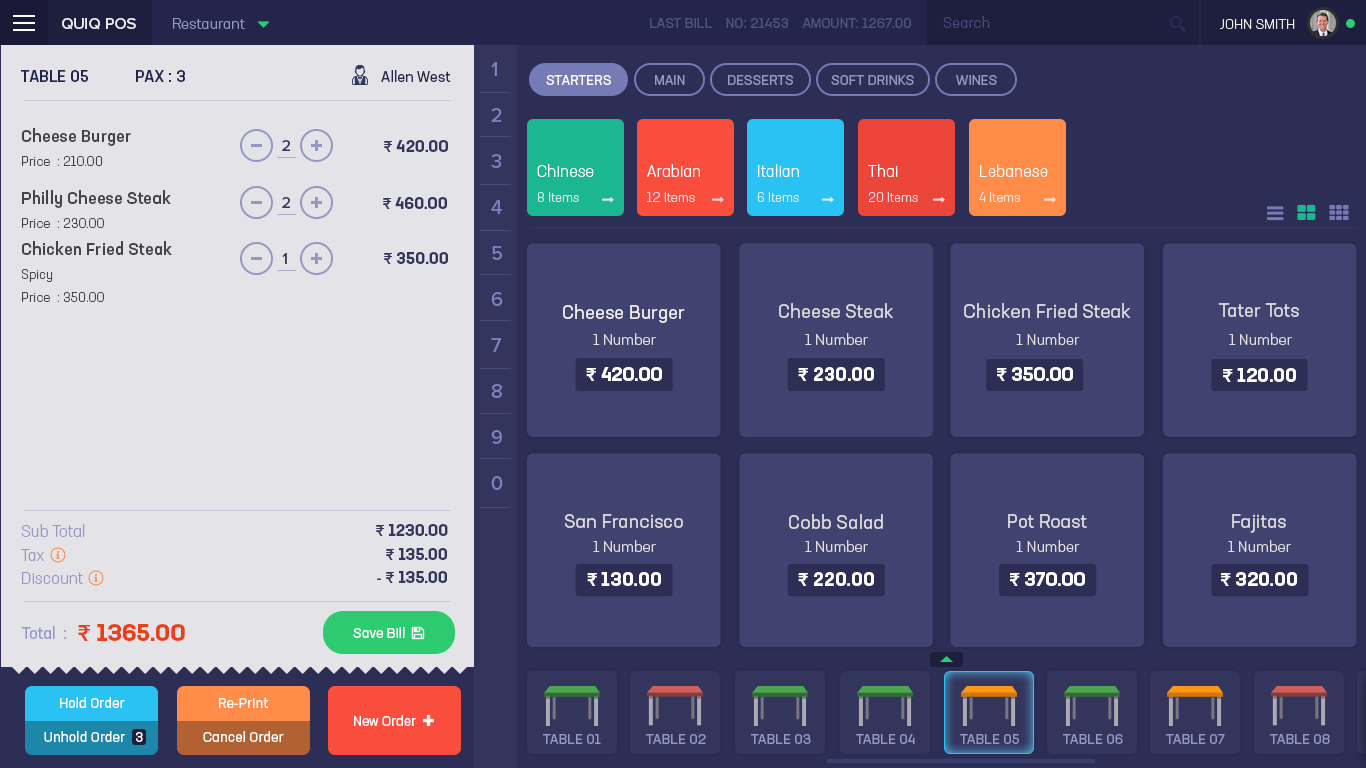
<style>
.page{position:relative;width:1366px;height:768px;background:#e3e3e8}
.page>*{position:absolute;margin:0}
.t1{font:15px "NeusaNextStd-Light";color:#474975}
.t2{font:16px "ProximaNova-Medium";color:#ededed}
.t3{font:15px "NeusaNextStd-Light";color:#9597c4}
.t4{font:14px "NeusaNextStd-Regular";color:#50537d;text-transform:uppercase}
.t5{font:14px "NeusaNextStd-Light";color:#ededed;text-transform:uppercase}
.t6{font:20px/46px "ProximaNova-Medium";color:#7e82c0}
.t7{font:16px "NeusaNextStd-Medium";color:#23254a;text-transform:uppercase}
.t8{font:15px "NeusaNextStd-Regular";color:#23254a}
.t9{font:14px "NeusaNextStd-Regular";color:#ffffff;text-transform:uppercase}
.t10{font:14px "NeusaNextStd-Regular";color:#9597c4;text-transform:uppercase}
.t11{font:17px "NeusaNextStd-Medium";color:#444444}
.t12{font:16px "ProximaNova-Medium";color:#33355d}
.t13{font:16px "NeusaNextStd-Bold";color:#33355d}
.t14{font:16px "ProximaNova-Semibold";color:#33355d}
.t15{font:13px "NeusaNextStd-Light";color:#444444}
.t16{font:16px "NeusaNextStd-Light";color:#ffffff}
.t17{font:13px "NeusaNextStd-Light";color:#d6eee6}
.t18{font:13px "NeusaNextStd-Light";color:#fedbd9}
.t19{font:13px "NeusaNextStd-Light";color:#d7f0fc}
.t20{font:13px "NeusaNextStd-Light";color:#fadbd9}
.t21{font:13px "NeusaNextStd-Light";color:#ffe6db}
.t22{font:19px "NeusaNextStd-Regular";color:#f5f5f5}
.t23{font:19px "NeusaNextStd-Regular";color:#e0e0e0}
.t24{font:15.2px "NeusaNextStd-Light";color:#e0e0e0}
.t25{font:19px "NeusaNextStd-Bold";color:#ffffff}
.t26{font:19px "ProximaNova-Semibold";color:#ffffff}
.t27{font:16px "NeusaNextStd-Light";color:#9597c4}
.t28{font:16px "NeusaNextStd-Regular";color:#9597c4}
.t29{font:24px "NeusaNextStd-Bold";color:#e84118}
.t30{font:24px "ProximaNova-Semibold";color:#e84118}
.t31{font:14px "NeusaNextStd-Regular";color:#ffffff}
</style>
<div class="page">
<p class="t1" style="left:943px;top:16px;width:47px;height:12px">Search</p>
<p class="t2" style="left:62px;top:18px;width:74px;height:12px">QUIQ POS</p>
<p class="t3" style="left:173px;top:18px;width:72px;height:11px">Restaurant</p>
<p class="t4" style="left:650px;top:18px;width:261px;height:10px">Last Bill    NO: 21453    Amount: 1267.00</p>
<p class="t5" style="left:1220px;top:19px;width:75px;height:10px">John Smith</p>
<p class="t6" style="left:491px;top:62px;width:12px;height:428px">1<br>2<br>3<br>4<br>5<br>6<br>7<br>8<br>9<br>0</p>
<p class="t7" style="left:21px;top:70px;width:67px;height:12px">Table 05</p>
<p class="t7" style="left:136px;top:70px;width:49px;height:12px">PAX : 3</p>
<p class="t8" style="left:381px;top:70px;width:70px;height:12px">Allen West</p>
<p class="t9" style="left:546px;top:75px;width:65px;height:10px">Starters</p>
<p class="t10" style="left:655px;top:75px;width:30px;height:10px">Main</p>
<p class="t10" style="left:728px;top:75px;width:65px;height:10px">Desserts</p>
<p class="t10" style="left:831px;top:75px;width:83px;height:10px">Soft Drinks</p>
<p class="t10" style="left:956px;top:75px;width:41px;height:10px">Wines</p>
<p class="t11" style="left:22px;top:128px;width:109px;height:18px">Cheese Burger</p>
<p class="t12" style="left:282px;top:140px;width:8px;height:11px">2</p>
<p class="t13" style="left:384px;top:140px;width:64px;height:12px"><span class="t14">₹</span> 420.00</p>
<p class="t15" style="left:22px;top:156px;width:81px;height:10px">Price : 210.00</p>
<p class="t16" style="left:537px;top:164px;width:57px;height:13px">Chinese</p>
<p class="t16" style="left:647px;top:164px;width:53px;height:13px">Arabian</p>
<p class="t16" style="left:758px;top:164px;width:41px;height:13px">Italian</p>
<p class="t16" style="left:868px;top:164px;width:30px;height:13px">Thai</p>
<p class="t16" style="left:980px;top:164px;width:68px;height:13px">Lebanese</p>
<p class="t11" style="left:22px;top:190px;width:149px;height:18px">Philly Cheese Steak</p>
<p class="t12" style="left:282px;top:197px;width:8px;height:11px">2</p>
<p class="t13" style="left:383px;top:197px;width:64px;height:12px"><span class="t14">₹</span> 460.00</p>
<p class="t17" style="left:537px;top:192px;width:42px;height:10px">8 Items</p>
<p class="t18" style="left:647px;top:192px;width:48px;height:10px">12 Items</p>
<p class="t19" style="left:757px;top:192px;width:42px;height:10px">6 Items</p>
<p class="t20" style="left:868px;top:192px;width:50px;height:10px">20 Items</p>
<p class="t21" style="left:979px;top:192px;width:42px;height:10px">4 Items</p>
<p class="t15" style="left:22px;top:218px;width:82px;height:10px">Price : 230.00</p>
<p class="t11" style="left:22px;top:241px;width:150px;height:14px">Chicken Fried Steak</p>
<p class="t12" style="left:282px;top:253px;width:5px;height:11px">1</p>
<p class="t13" style="left:384px;top:252px;width:64px;height:12px"><span class="t14">₹</span> 350.00</p>
<p class="t15" style="left:21px;top:269px;width:32px;height:13px">Spicy</p>
<p class="t15" style="left:22px;top:292px;width:82px;height:10px">Price : 350.00</p>
<p class="t22" style="left:563px;top:304px;width:122px;height:19px">Cheese Burger</p>
<p class="t23" style="left:779px;top:303px;width:114px;height:15px">Cheese Steak</p>
<p class="t23" style="left:964px;top:303px;width:167px;height:15px">Chicken Fried Steak</p>
<p class="t23" style="left:1218px;top:303px;width:81px;height:14px">Tater Tots</p>
<p class="t24" style="left:593px;top:333px;width:63px;height:12px">1 Number</p>
<p class="t24" style="left:805px;top:333px;width:63px;height:12px">1 Number</p>
<p class="t24" style="left:1016px;top:333px;width:64px;height:12px">1 Number</p>
<p class="t24" style="left:1229px;top:333px;width:63px;height:12px">1 Number</p>
<p class="t25" style="left:586px;top:367px;width:76px;height:14px"><span class="t26">₹</span> 420.00</p>
<p class="t25" style="left:798px;top:367px;width:76px;height:14px"><span class="t26">₹</span> 230.00</p>
<p class="t25" style="left:997px;top:367px;width:76px;height:14px"><span class="t26">₹</span> 350.00</p>
<p class="t25" style="left:1223px;top:368px;width:73px;height:14px"><span class="t26">₹</span> 120.00</p>
<p class="t23" style="left:565px;top:514px;width:118px;height:14px">San Francisco</p>
<p class="t23" style="left:789px;top:514px;width:94px;height:15px">Cobb Salad</p>
<p class="t23" style="left:1008px;top:514px;width:79px;height:14px">Pot Roast</p>
<p class="t23" style="left:1232px;top:514px;width:54px;height:19px">Fajitas</p>
<p class="t27" style="left:21px;top:524px;width:64px;height:13px">Sub Total</p>
<p class="t13" style="left:376px;top:524px;width:72px;height:12px"><span class="t14">₹</span> 1230.00</p>
<p class="t24" style="left:593px;top:540px;width:63px;height:12px">1 Number</p>
<p class="t24" style="left:805px;top:540px;width:63px;height:12px">1 Number</p>
<p class="t24" style="left:1016px;top:540px;width:64px;height:12px">1 Number</p>
<p class="t24" style="left:1228px;top:540px;width:63px;height:12px">1 Number</p>
<p class="t27" style="left:21px;top:549px;width:23px;height:12px">Tax</p>
<p class="t13" style="left:386px;top:548px;width:61px;height:12px"><span class="t14">₹</span> 135.00</p>
<p class="t27" style="left:22px;top:572px;width:61px;height:12px">Discount</p>
<p class="t13" style="left:377px;top:571px;width:70px;height:12px"><span class="t14">- ₹</span> 135.00</p>
<p class="t25" style="left:587px;top:572px;width:74px;height:14px"><span class="t26">₹</span> 130.00</p>
<p class="t25" style="left:798px;top:572px;width:76px;height:14px"><span class="t26">₹</span> 220.00</p>
<p class="t25" style="left:1010px;top:572px;width:75px;height:14px"><span class="t26">₹</span> 370.00</p>
<p class="t25" style="left:1221px;top:572px;width:76px;height:14px"><span class="t26">₹</span> 320.00</p>
<p class="t28" style="left:22px;top:626px;width:44px;height:13px">Total  :</p>
<p class="t29" style="left:78px;top:624px;width:107px;height:17px"><span class="t30">₹</span> 1365.00</p>
<p class="t31" style="left:60px;top:697px;width:65px;height:11px">Hold Order</p>
<p class="t31" style="left:219px;top:697px;width:49px;height:11px">Re-Print</p>
<p class="t31" style="left:44px;top:731px;width:99px;height:11px">Unhold Order   3</p>
<p class="t31" style="left:203px;top:731px;width:81px;height:11px">Cancel Order</p>
<p class="t10" style="left:543px;top:734px;width:58px;height:10px">Table 01</p>
<p class="t10" style="left:646px;top:734px;width:60px;height:10px">Table 02</p>
<p class="t10" style="left:751px;top:734px;width:60px;height:10px">Table 03</p>
<p class="t10" style="left:856px;top:734px;width:59px;height:10px">Table 04</p>
<p class="t10" style="left:960px;top:734px;width:59px;height:10px">Table 05</p>
<p class="t10" style="left:1063px;top:734px;width:60px;height:10px">Table 06</p>
<p class="t10" style="left:1166px;top:734px;width:59px;height:10px">Table 07</p>
<p class="t10" style="left:1270px;top:734px;width:60px;height:10px">Table 08</p>
</div>
